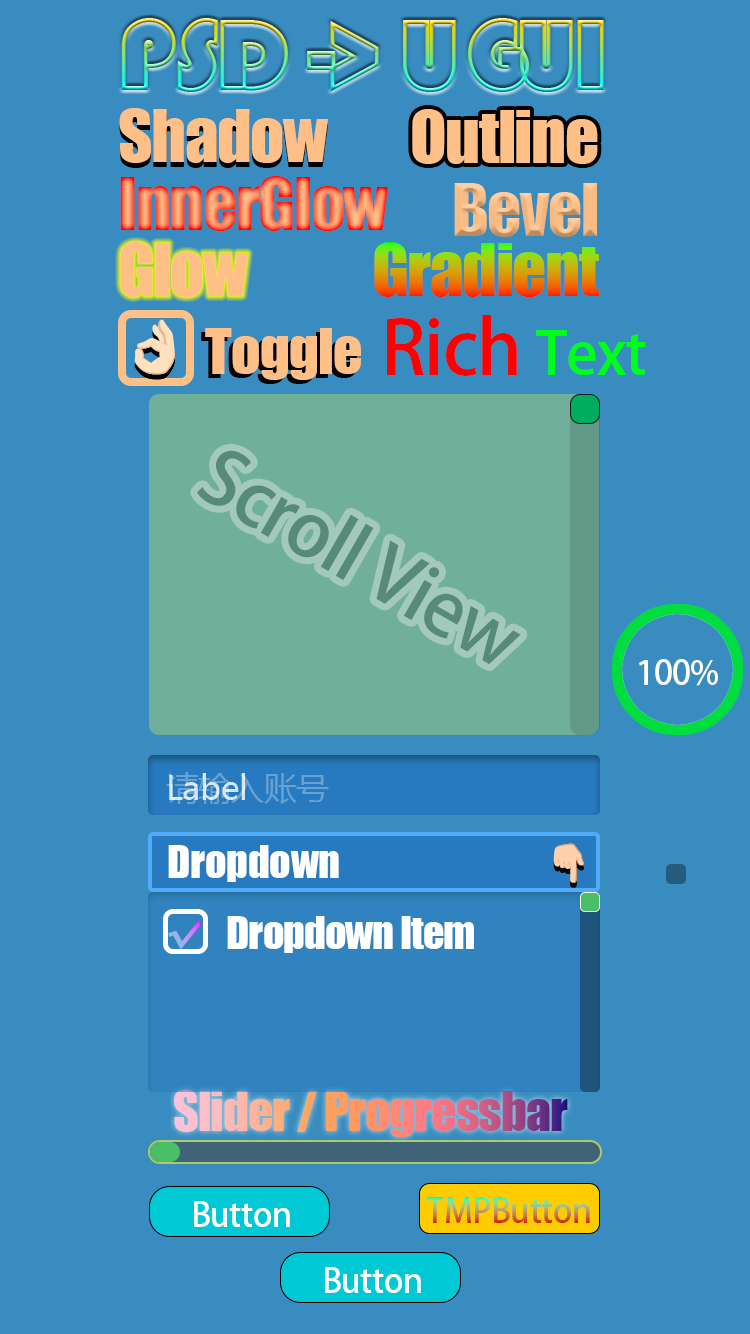
<style>
.page{position:relative;width:750px;height:1334px;background:#398cbf}
.page>*{position:absolute;margin:0}
.t1{font:66.7px "Impact";letter-spacing:-0.02em;color:#ffc087}
.t2{font:66.7px "Impact";letter-spacing:-0.02em}
.t3{font:75px "AdobeHeitiStd-Regular";letter-spacing:-0.02em;color:#ff0000}
.t4{font:58.3px "AdobeHeitiStd-Regular";letter-spacing:-0.02em;color:#00ff18}
.t5{font:58.3px "Impact";letter-spacing:-0.02em;color:#ffc087}
.t6{font:75px "AdobeHeitiStd-Regular";letter-spacing:-0.02em;color:#578a79}
.t7{font:33.3px "AdobeHeitiStd-Regular";letter-spacing:-0.02em;color:#ffffff}
.t8{font:33.3px "MicrosoftYaHeiUI";letter-spacing:-0.02em;color:#68a2d2}
.t9{font:33.3px "MicrosoftYaHeiUI";letter-spacing:-0.02em;color:#d8e7f3}
.t10{font:41.7px "Impact";color:#ffffff}
.t11{font:41.7px "Impact";letter-spacing:-0.02em;color:#ffffff}
.t12{font:50px "Impact";letter-spacing:-0.02em}
.t13{font:33.3px "AdobeHeitiStd-Regular";letter-spacing:-0.02em}
</style>
<div class="page">
<p class="t1" style="left:119px;top:108px;width:209px;height:55px">Shadow</p>
<p class="t1" style="left:412px;top:109px;width:186px;height:55px">Outline</p>
<p class="t2" style="left:120px;top:176px;width:268px;height:55px">InnerGlow</p>
<p class="t1" style="left:454px;top:183px;width:143px;height:54px">Bevel</p>
<p class="t1" style="left:120px;top:242px;width:128px;height:55px">Glow</p>
<p class="t2" style="left:374px;top:242px;width:226px;height:55px">Gradient</p>
<p class="t3" style="left:387px;top:315px;width:259px;height:61px">Rich <span class="t4">Text</span></p>
<p class="t5" style="left:205px;top:328px;width:156px;height:52px">Toggle</p>
<p class="t6" style="left:197px;top:450px;width:324px;height:215px;rotate:30deg">Scroll View</p>
<p class="t7" style="left:639px;top:659px;width:79px;height:27px">100%</p>
<p class="t8" style="left:166px;top:772px;width:163px;height:32px">请输入账号</p>
<p class="t9" style="left:169px;top:773px;width:76px;height:27px">Label</p>
<p class="t10" style="left:168px;top:845px;width:171px;height:37px">Dropdown</p>
<p class="t11" style="left:227px;top:916px;width:247px;height:37px">Dropdown Item</p>
<p class="t12" style="left:174px;top:1090px;width:394px;height:47px">Slider / Progressbar</p>
<p class="t7" style="left:194px;top:1201px;width:96px;height:26px">Button</p>
<p class="t13" style="left:426px;top:1197px;width:164px;height:26px">TMPButton</p>
<p class="t7" style="left:325px;top:1267px;width:96px;height:26px">Button</p>
</div>
